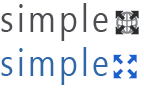
<style>
.page{position:relative;width:144px;height:88px;background:#ffffff}
.page>*{position:absolute;margin:0}
.t1{font:37.9px "SegoeUI";letter-spacing:0.1em;color:#4e4d52;scale:0.85 1}
.t2{font:37.9px "SegoeUI";letter-spacing:0.1em;color:#3068a7;scale:0.85 1}
</style>
<div class="page">
<p class="t1" style="left:1px;top:3px;width:107px;height:38px">simple</p>
<p class="t2" style="left:1px;top:47px;width:107px;height:38px">simple</p>
</div>
